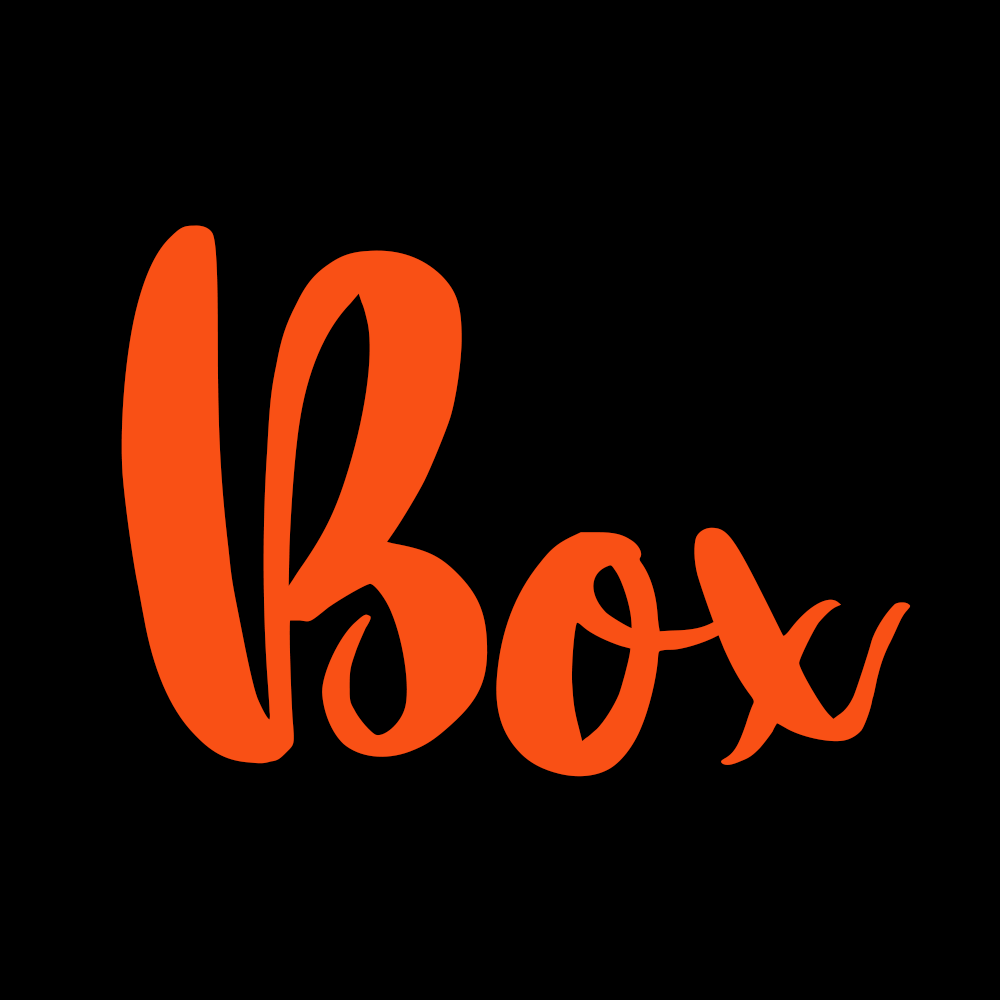
<style>
.page{position:relative;width:1000px;height:1000px;background:#000000}
.page>*{position:absolute;margin:0}
.t1{font:635px "BetterWeather";color:#f95015}
.t2{font:762px "BetterWeather";color:#f95015}
</style>
<div class="page">
<p class="t1" style="left:121px;top:225px;width:790px;height:552px"><span class="t2">B</span>ox</p>
</div>
